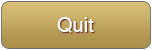
<style>
.page{position:relative;width:152px;height:50px}
.page>*{position:absolute;margin:0}
.t1{font:20px "Helvetica";color:#ffffff}
</style>
<div class="page">
<p class="t1" style="left:57px;top:17px;width:37px;height:16px">Quit</p>
</div>
